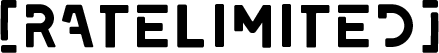
<style>
.page{position:relative;width:439px;height:53px;background:#ffffff}
.page>*{position:absolute;margin:0}
.t1{font:60px "LEIXO-Bold";color:#000000}
</style>
<div class="page">
<p class="t1" style="left:0px;top:0px;width:439px;height:53px">[RATELIMITED]</p>
</div>
